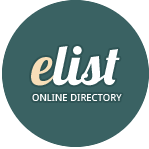
<style>
.page{position:relative;width:149px;height:149px;background:#3a6263}
.page>*{position:absolute;margin:0}
.t1{font:55px "Lobster1.4";color:#ffffff}
.t2{font:55px "Lobster1.4";color:#f8deb8}
.t3{font:10px "DroidSans";color:#ffffff}
</style>
<div class="page">
<p class="t1" style="left:31px;top:46px;width:89px;height:40px"><span class="t2">e</span>list</p>
<p class="t3" style="left:32px;top:94px;width:90px;height:7px">ONLINE DIRECTORY</p>
</div>
